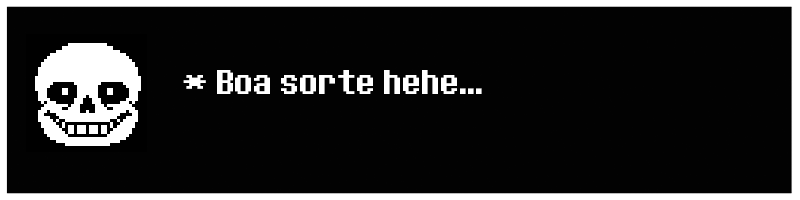
<style>
.page{position:relative;width:800px;height:200px;background:#020202}
.page>*{position:absolute;margin:0}
.t1{font:36px "DeterminationSans";color:#ffffff}
</style>
<div class="page">
<p class="t1" style="left:183px;top:70px;width:299px;height:24px">* Boa sorte hehe...</p>
</div>
